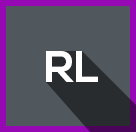
<style>
.page{position:relative;width:136px;height:132px;background:#50585d}
.page>*{position:absolute;margin:0}
.t1{font:44px "NexaBold";color:#ffffff}
</style>
<div class="page">
<p class="t1" style="left:46px;top:51px;width:52px;height:31px">RL</p>
</div>
